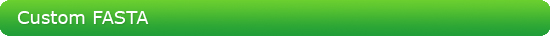
<style>
.page{position:relative;width:550px;height:36px}
.page>*{position:absolute;margin:0}
.t1{font:18px "Verdana";color:#ffffff}
</style>
<div class="page">
<p class="t1" style="left:17px;top:11px;width:132px;height:13px">Custom FASTA</p>
</div>
